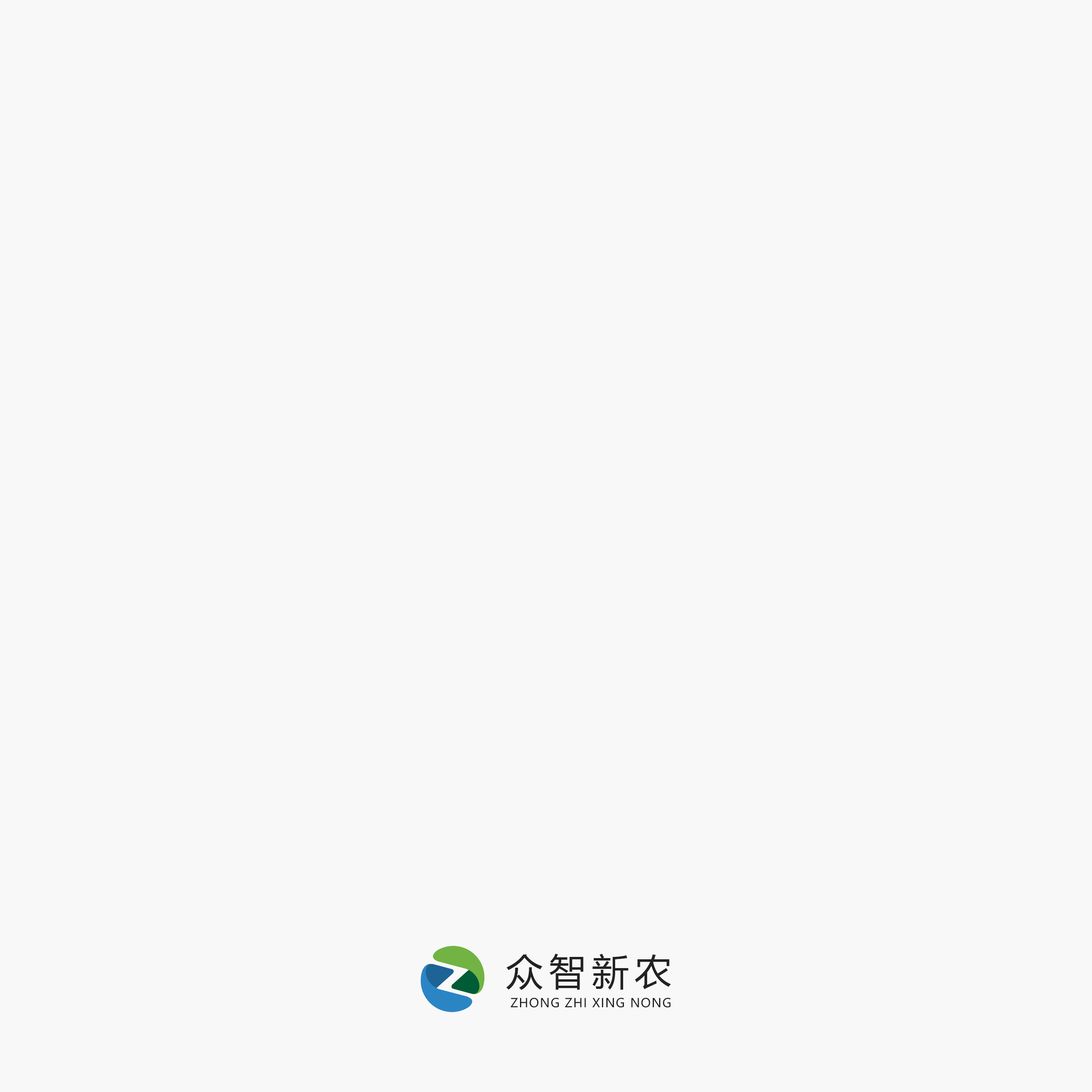
<style>
.page{position:relative;width:1092px;height:1092px;background:#f8f8f8}
.page>*{position:absolute;margin:0}
.t1{font:37px "MicrosoftYaHei";letter-spacing:0.16em;color:#222222}
.t2{font:12.3px "MicrosoftYaHei";letter-spacing:0.06em;color:#222222}
</style>
<div class="page">
<p class="t1" style="left:506px;top:954px;width:165px;height:36px">众智新农</p>
<p class="t2" style="left:510px;top:998px;width:161px;height:10px">ZHONG ZHI XING NONG</p>
</div>
